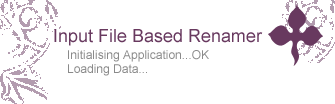
<style>
.page{position:relative;width:335px;height:104px;background:#ffffff}
.page>*{position:absolute;margin:0}
.t1{font:18px "ArialMT";color:#68395f}
.t2{font:12px "ArialMT";color:#8a8a8a}
</style>
<div class="page">
<p class="t1" style="left:54px;top:29px;width:209px;height:17px">Input File Based Renamer</p>
<p class="t2" style="left:68px;top:50px;width:141px;height:26px">Initialising Application...OK<br>Loading Data...</p>
</div>
